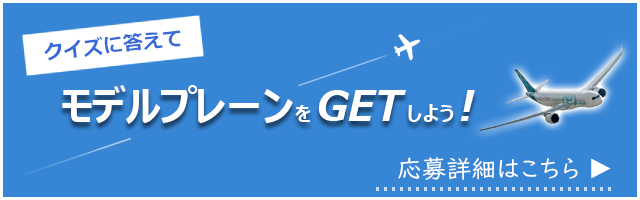
<style>
.page{position:relative;width:640px;height:200px;background:#3786d6}
.page>*{position:absolute;margin:0}
.t1{font:20px "Meiryo-BoldItalic";color:#376ad6}
.t2{font:40.9px "MeiryoUI-BoldItalic";color:#ffffff}
.t3{font:20.4px "MeiryoUI-BoldItalic";color:#ffffff}
.t4{font:25px "UDDigiKyokashoNK-R";color:#ffffff}
</style>
<div class="page">
<p class="t1" style="left:44px;top:30px;width:137px;height:31px;rotate:-6deg">クイズに答えて</p>
<p class="t2" style="left:62px;top:85px;width:413px;height:39px">モデルプレーン<span class="t3">を</span>GET<span class="t3">しよう</span>!</p>
<p class="t4" style="left:398px;top:157px;width:180px;height:23px">応募詳細はこちら</p>
<p class="t4" style="left:591px;top:158px;width:20px;height:21px;rotate:90deg">▲</p>
</div>
